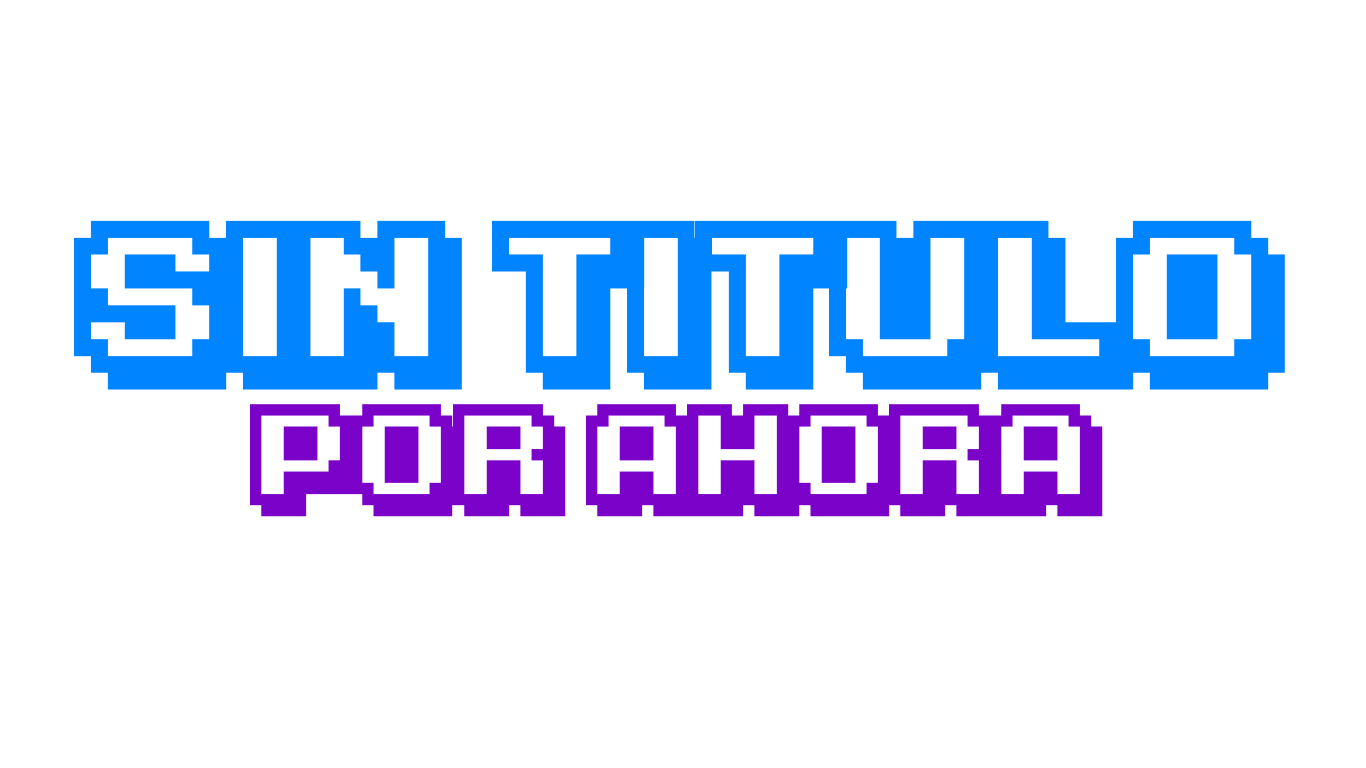
<style>
.page{position:relative;width:1366px;height:768px;background:#ffffff}
.page>*{position:absolute;margin:0}
.t1{font:172.5px "KarmaticArcade";color:#0084ff}
.t2{font:115px "KarmaticArcade";color:#7b02c8}
</style>
<div class="page">
<p class="t1" style="left:74px;top:220px;width:1211px;height:297px;text-align:center">sin titulo<br><span class="t2">por ahora</span></p>
</div>
